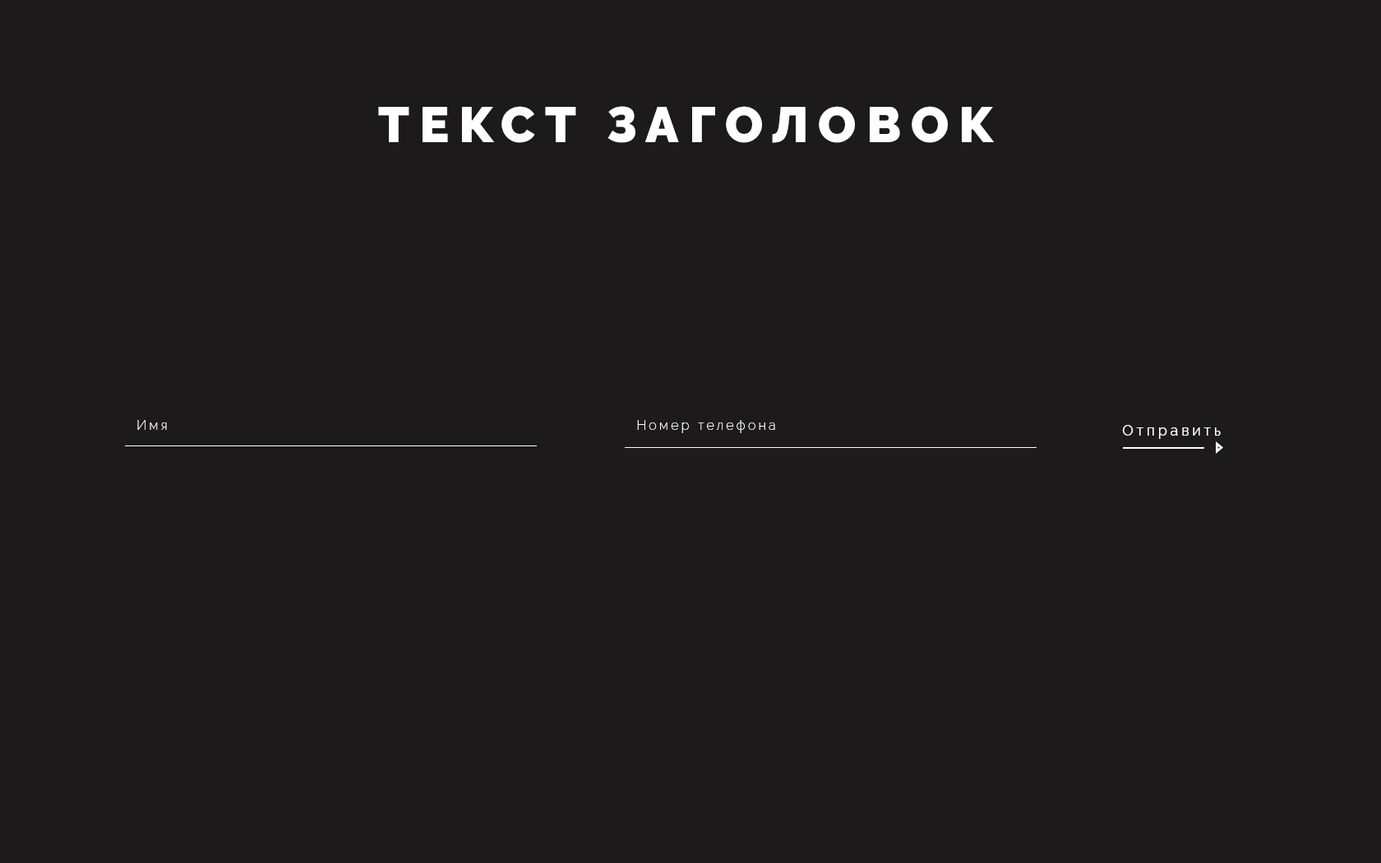
<style>
.page{position:relative;width:1381px;height:863px;background:#1c1a1a}
.page>*{position:absolute;margin:0}
.t1{font:49.7px "Raleway-Black";letter-spacing:0.2em;color:#ffffff}
.t2{font:13.1px "Raleway-ExtraLight";letter-spacing:0.2em;color:#ffffff}
.t3{font:14.8px "Raleway-Regular";letter-spacing:0.2em;color:#ffffff}
</style>
<div class="page">
<p class="t1" style="left:378px;top:106px;width:617px;height:37px">ТЕКСТ ЗАГОЛОВОК</p>
<p class="t2" style="left:137px;top:420px;width:30px;height:10px">Имя</p>
<p class="t2" style="left:637px;top:420px;width:138px;height:13px">Номер телефона</p>
<p class="t3" style="left:1122px;top:425px;width:99px;height:14px">Отправить</p>
</div>
